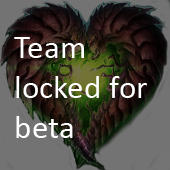
<style>
.page{position:relative;width:170px;height:170px;background:#737373}
.page>*{position:absolute;margin:0}
.t1{font:33.3px "Calibri";color:#ffffff}
</style>
<div class="page">
<p class="t1" style="left:14px;top:37px;width:133px;height:101px">Team locked for beta</p>
</div>
